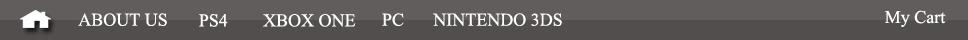
<style>
.page{position:relative;width:968px;height:40px;background:#615d5d}
.page>*{position:absolute;margin:0}
.t1{font:18px "TimesNewRomanPSMT";color:#ffffff}
</style>
<div class="page">
<p class="t1" style="left:78px;top:13px;width:89px;height:13px">ABOUT US</p>
<p class="t1" style="left:199px;top:14px;width:29px;height:13px">PS4</p>
<p class="t1" style="left:263px;top:14px;width:93px;height:13px">XBOX ONE</p>
<p class="t1" style="left:382px;top:13px;width:22px;height:13px">PC</p>
<p class="t1" style="left:433px;top:13px;width:129px;height:13px">NINTENDO 3DS</p>
<p class="t1" style="left:885px;top:10px;width:61px;height:17px">My Cart</p>
</div>
